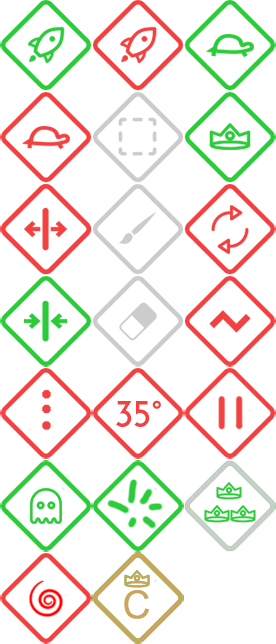
<style>
.page{position:relative;width:276px;height:644px;background:#ffffff}
.page>*{position:absolute;margin:0}
.t1{font:38.6px "JosefinSans-SemiBold";color:#f34141}
.t2{font:38.8px "ArialMT";color:#cba55b}
</style>
<div class="page">
<p class="t1" style="left:116px;top:400px;width:45px;height:27px">35°</p>
<p class="t2" style="left:124px;top:590px;width:25px;height:29px">C</p>
</div>
